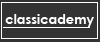
<style>
.page{position:relative;width:100px;height:42px;background:#333333}
.page>*{position:absolute;margin:0}
.t1{font:13.1px "CenturyGothic-Bold";color:#ffffff}
</style>
<div class="page">
<p class="t1" style="left:5px;top:14px;width:89px;height:13px">classicademy</p>
</div>
